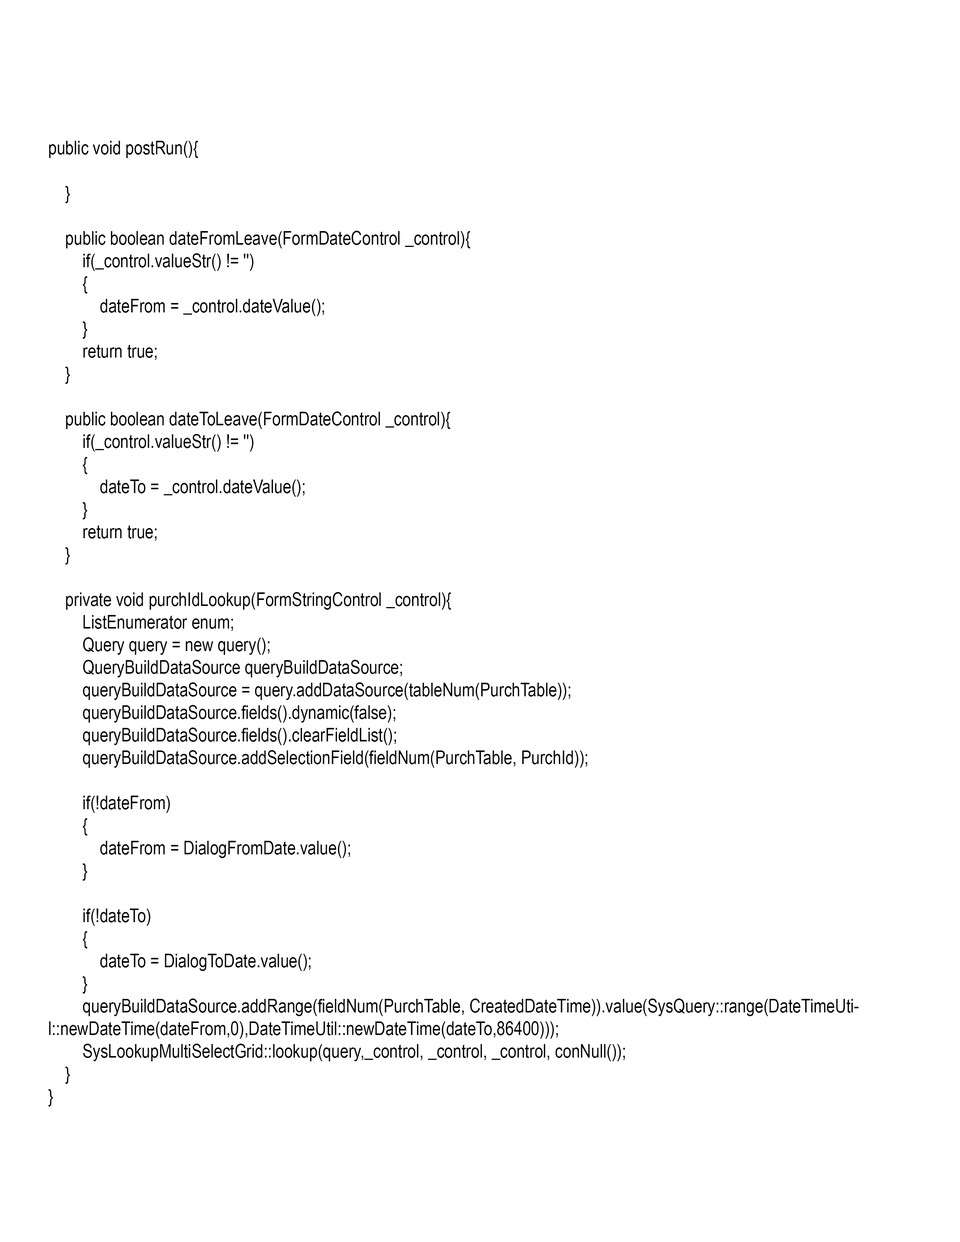
<style>
.page{position:relative;width:960px;height:1242px;background:#ffffff}
.page>*{position:absolute;margin:0}
.t1{font:18.8px "ArialNarrow";color:#000000}
</style>
<div class="page">
<p class="t1" style="left:48px;top:141px;width:811px;height:966px">public void postRun(){<br><br>    }<br><br>    public boolean dateFromLeave(FormDateControl _control){<br>        if(_control.valueStr() != '')<br>        {<br>            dateFrom = _control.dateValue();<br>        }<br>        return true;<br>    }<br><br>    public boolean dateToLeave(FormDateControl _control){<br>        if(_control.valueStr() != '')<br>        {<br>            dateTo = _control.dateValue();<br>        }<br>        return true;<br>    }<br><br>    private void purchIdLookup(FormStringControl _control){<br>        ListEnumerator enum;<br>        Query query = new query();<br>        QueryBuildDataSource queryBuildDataSource;<br>        queryBuildDataSource = query.addDataSource(tableNum(PurchTable));<br>        queryBuildDataSource.fields().dynamic(false);<br>        queryBuildDataSource.fields().clearFieldList();<br>        queryBuildDataSource.addSelectionField(fieldNum(PurchTable, PurchId));<br>        <br>        if(!dateFrom)<br>        {<br>            dateFrom = DialogFromDate.value();<br>        }<br>        <br>        if(!dateTo)<br>        {<br>            dateTo = DialogToDate.value();<br>        }<br>        queryBuildDataSource.addRange(fieldNum(PurchTable, CreatedDateTime)).value(SysQuery::range(DateTimeUtil::newDateTime(dateFrom,0),DateTimeUtil::newDateTime(dateTo,86400)));<br>        SysLookupMultiSelectGrid::lookup(query,_control, _control, _control, conNull());<br>    }<br>}</p>
</div>
